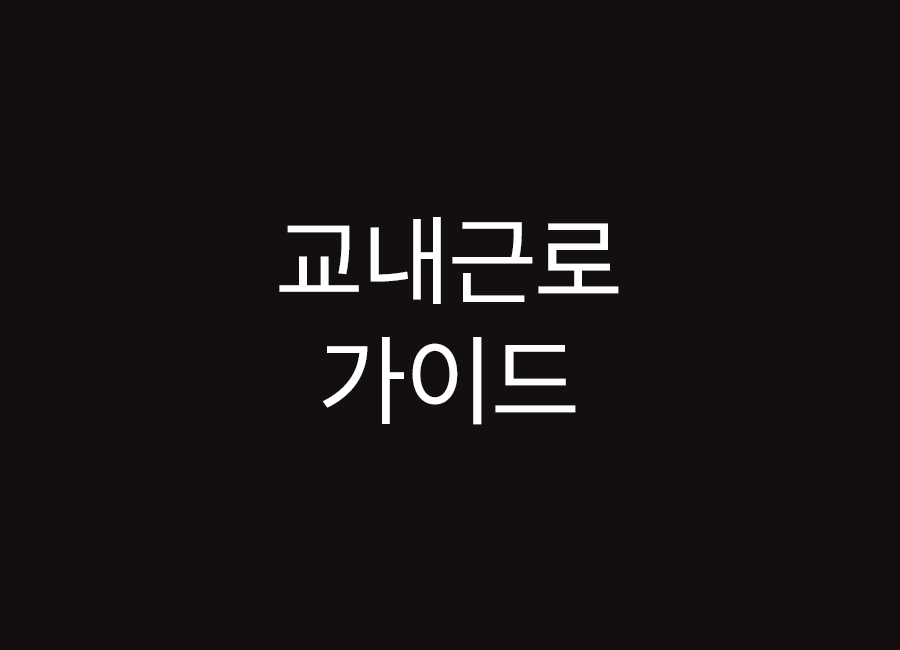
<style>
.page{position:relative;width:900px;height:650px;background:#130f0f}
.page>*{position:absolute;margin:0}
.t1{font:100px "Pretendard-Regular";color:#ffffff}
</style>
<div class="page">
<p class="t1" style="left:279px;top:217px;width:340px;height:208px;text-align:center">교내근로<br>가이드</p>
</div>
